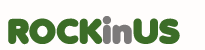
<style>
.page{position:relative;width:205px;height:50px;background:#fffdfc}
.page>*{position:absolute;margin:0}
.t1{font:34px "AnjaElianeaccent-Nornal";color:#3c6d27}
.t2{font:34px "AnjaElianeaccent-Nornal";color:#7c7a7a}
</style>
<div class="page">
<p class="t1" style="left:8px;top:16px;width:172px;height:29px">ROCK<span class="t2">in</span>US</p>
</div>
